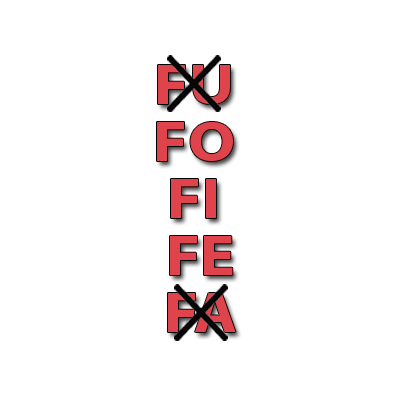
<style>
.page{position:relative;width:400px;height:400px;background:#ffffff}
.page>*{position:absolute;margin:0}
.t1{font:57px/57px "MyriadPro-Bold";color:#df444c;scale:1.16 1}
</style>
<div class="page">
<p class="t1" style="left:157px;top:65px;width:79px;height:267px;text-align:center">FU<br>FO<br>FI<br> FE<br> FA</p>
</div>
